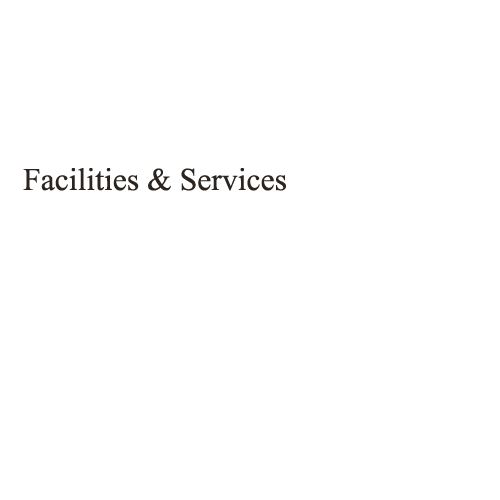
<style>
.page{position:relative;width:500px;height:500px;background:#ffffff}
.page>*{position:absolute;margin:0}
.t1{font:48px "AngsanaNew";color:#2c251f}
</style>
<div class="page">
<p class="t1" style="left:23px;top:168px;width:263px;height:23px">Facilities &amp; Services</p>
</div>
